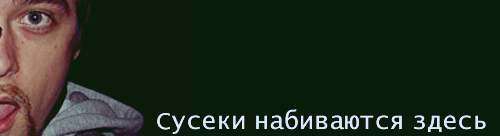
<style>
.page{position:relative;width:500px;height:136px;background:#091b09}
.page>*{position:absolute;margin:0}
.t1{font:25px "LucidaConsole";color:#dfe5ff}
</style>
<div class="page">
<p class="t1" style="left:157px;top:109px;width:329px;height:25px">Сусеки набиваются здесь</p>
</div>
